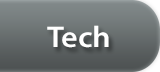
<style>
.page{position:relative;width:160px;height:72px}
.page>*{position:absolute;margin:0}
.t1{font:30px "MyriadPro-Semibold";color:#ffffff;scale:1.08 1}
</style>
<div class="page">
<p class="t1" style="left:47px;top:25px;width:62px;height:23px">Tech</p>
</div>
